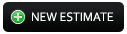
<style>
.page{position:relative;width:127px;height:34px;background:#ffffff}
.page>*{position:absolute;margin:0}
.t1{font:13px "Corbel";color:#ffffff;scale:0.94 1}
</style>
<div class="page">
<p class="t1" style="left:32px;top:12px;width:82px;height:10px">NEW ESTIMATE</p>
</div>
